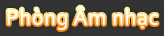
<style>
.page{position:relative;width:164px;height:36px;background:#333333}
.page>*{position:absolute;margin:0}
.t1{font:22px "Corbel";letter-spacing:0.035em;color:#ffffff}
</style>
<div class="page">
<p class="t1" style="left:7px;top:6px;width:151px;height:24px">Phòng Âm nhạc</p>
</div>
